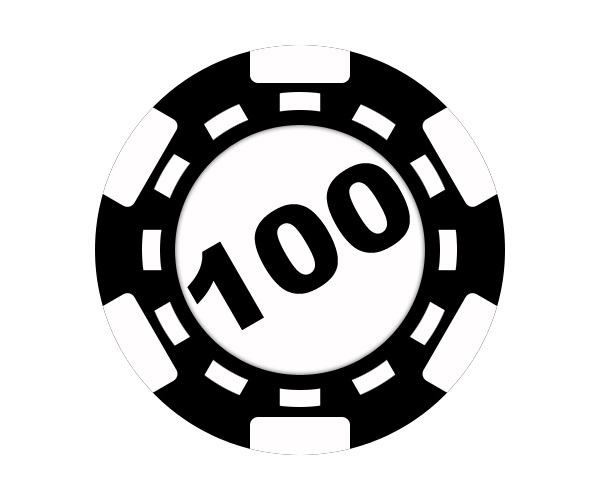
<style>
.page{position:relative;width:600px;height:500px;background:#ffffff}
.page>*{position:absolute;margin:0}
.t1{font:120px "Arial-Black";color:#000000;scale:1.03 1}
</style>
<div class="page">
<p class="t1" style="left:187px;top:163px;width:223px;height:167px;rotate:-30deg">100</p>
</div>
